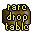
<style>
.page{position:relative;width:34px;height:35px;background:#ffffff}
.page>*{position:absolute;margin:0}
.t1{font:13.3px "Runescape-Chat-Font";letter-spacing:0.005em;color:#ffff00}
</style>
<div class="page">
<p class="t1" style="left:8px;top:5px;width:18px;height:5px">rare</p>
<p class="t1" style="left:7px;top:12px;width:20px;height:10px">drop</p>
<p class="t1" style="left:6px;top:22px;width:22px;height:8px">table</p>
</div>
